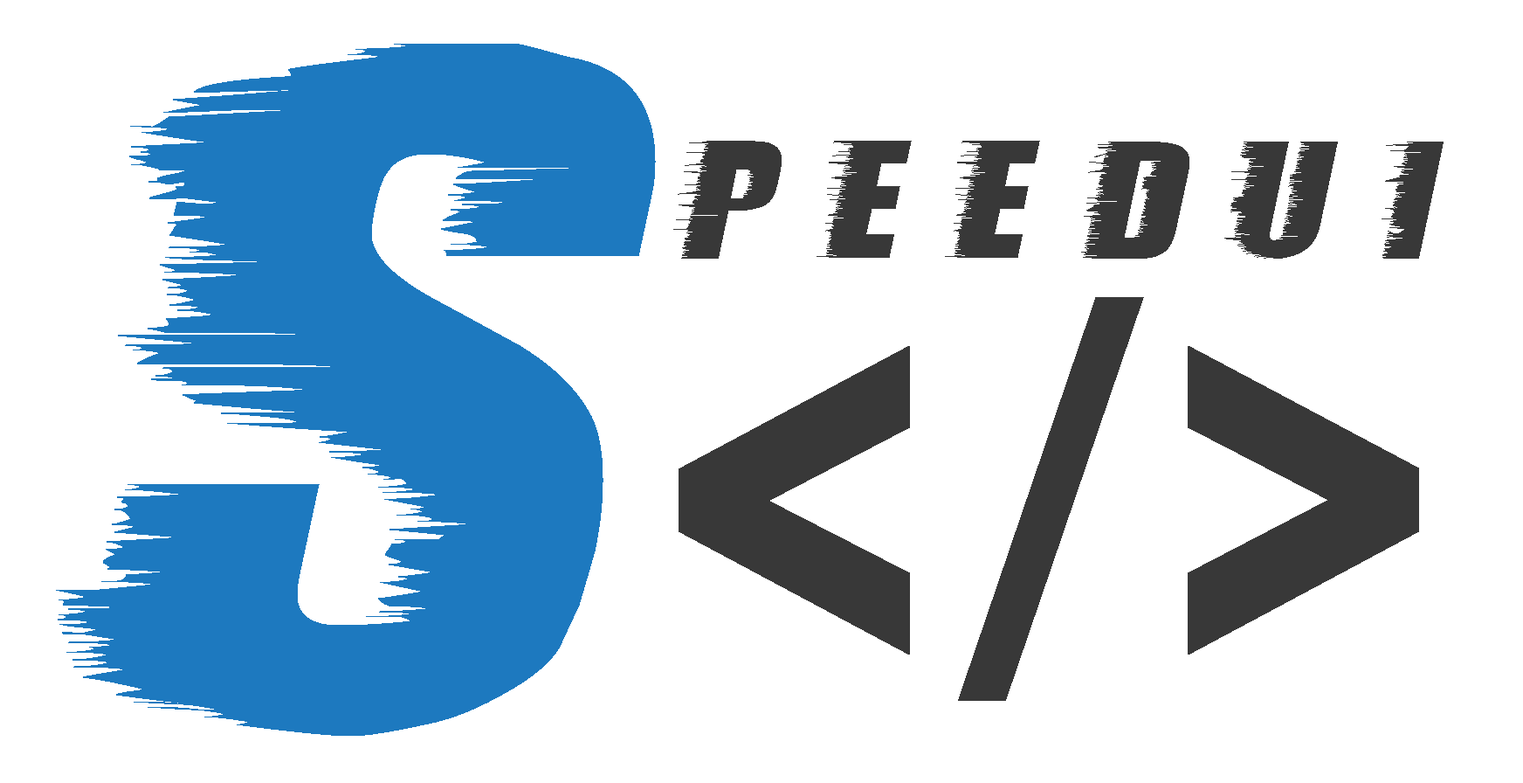
<style>
.page{position:relative;width:1523px;height:783px;background:#ffffff}
.page>*{position:absolute;margin:0}
.t1{font:873.6px "StormExtraBold";letter-spacing:0.05em;color:#1d79bf}
.t2{font:209.7px "StormExtraBold";letter-spacing:0.2em;color:#383838}
.t3{font:545.1px "ArialMT";letter-spacing:0.05em;color:#383838;scale:1.22 1}
.t4{font:629px "Impact";letter-spacing:0.05em;color:#383838;scale:0.78 1}
</style>
<div class="page">
<p class="t1" style="left:56px;top:44px;width:600px;height:692px">S</p>
<p class="t2" style="left:674px;top:141px;width:770px;height:118px">peedui</p>
<p class="t3" style="left:958px;top:297px;width:186px;height:404px">/</p>
<p class="t4" style="left:679px;top:346px;width:741px;height:308px">&lt;  &gt;</p>
</div>
